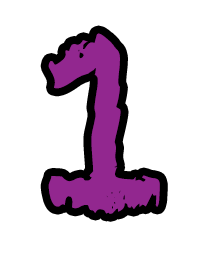
<style>
.page{position:relative;width:203px;height:256px;background:#ffffff}
.page>*{position:absolute;margin:0}
.t1{font:250px "Chalkduster";color:#92278f}
</style>
<div class="page">
<p class="t1" style="left:48px;top:33px;width:112px;height:181px">1</p>
</div>
